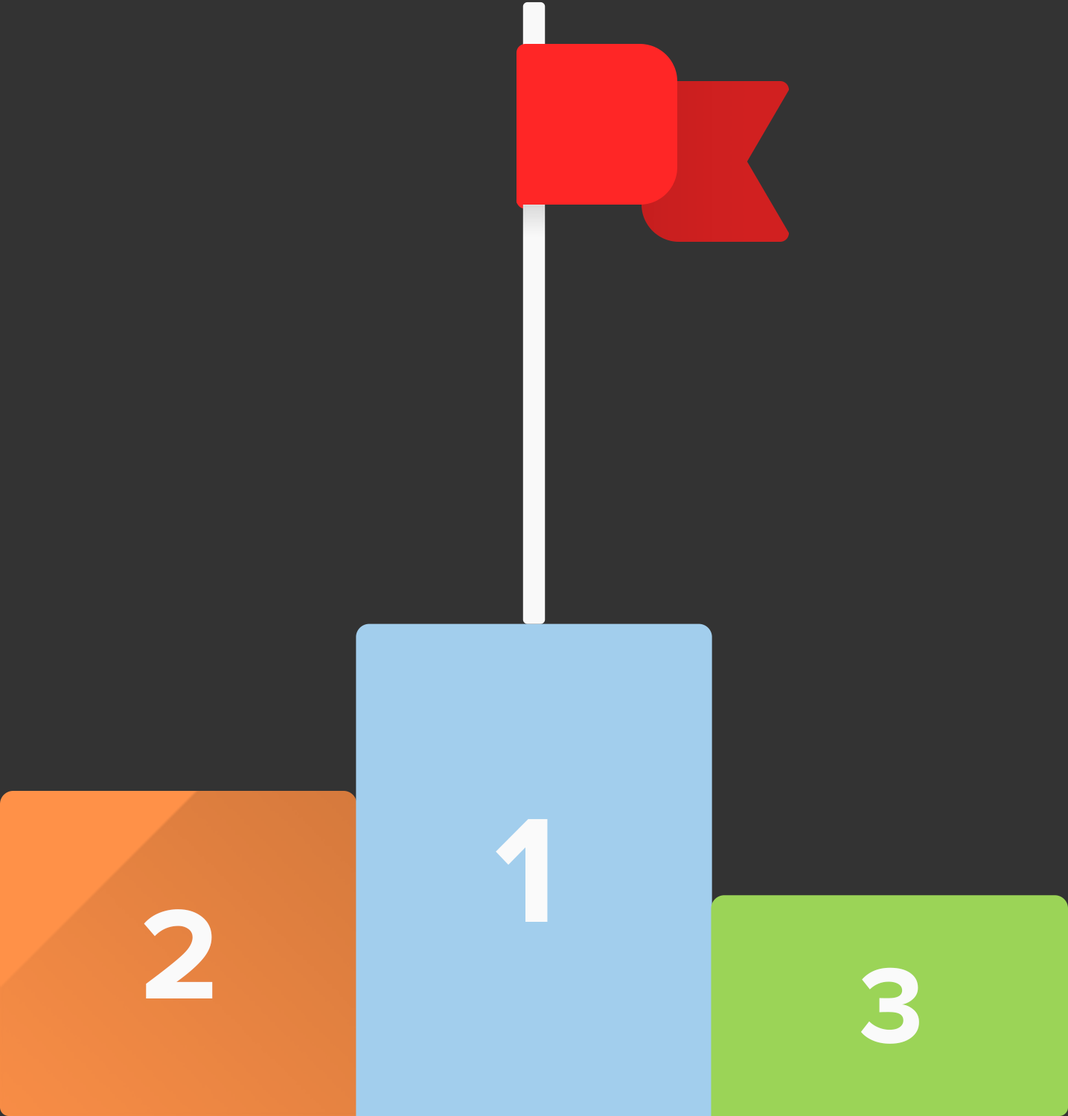
<style>
.page{position:relative;width:1068px;height:1116px;background:#333333}
.page>*{position:absolute;margin:0}
.t1{font:153.8px "ProximaNova-Bold";letter-spacing:0.025em;color:#fafafa}
.t2{font:131.9px "ProximaNova-Bold";letter-spacing:0.025em;color:#fafafa}
.t3{font:109.9px "ProximaNova-Bold";letter-spacing:0.025em;color:#fafafa}
</style>
<div class="page">
<p class="t1" style="left:496px;top:819px;width:52px;height:103px">1</p>
<p class="t2" style="left:144px;top:910px;width:69px;height:89px">2</p>
<p class="t3" style="left:860px;top:968px;width:59px;height:76px">3</p>
</div>
